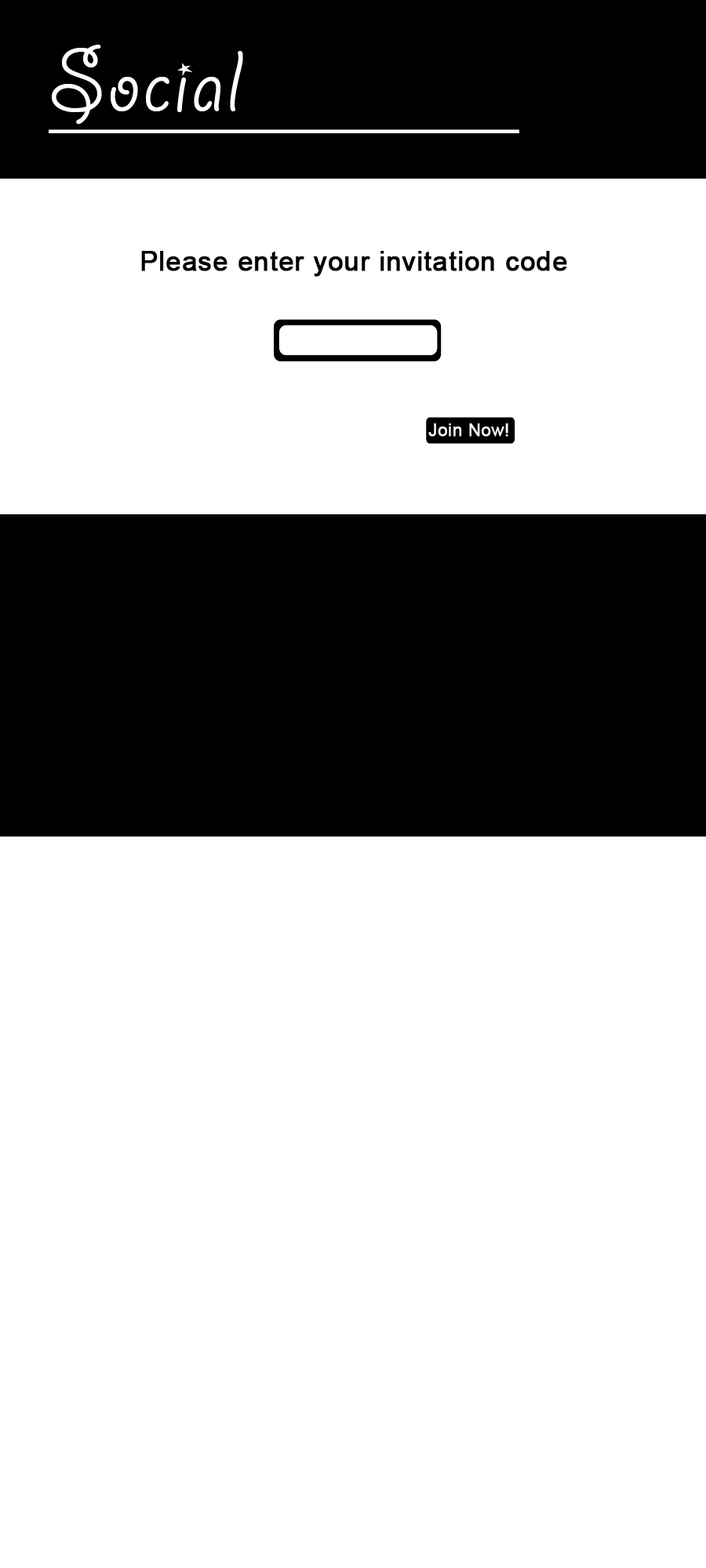
<style>
.page{position:relative;width:706px;height:1568px;background:#ffffff}
.page>*{position:absolute;margin:0}
.t1{font:97.2px "GiddyupStd";letter-spacing:0.02em;color:#ffffff}
.t2{font:26.7px "ArialMT";letter-spacing:0.02em;color:#000000;font-weight:bold}
.t3{font:16.9px "ArialMT";letter-spacing:0.02em;color:#f5f5f5;font-weight:bold}
</style>
<div class="page">
<p class="t1" style="left:52px;top:45px;width:191px;height:80px">Social</p>
<p class="t2" style="left:141px;top:251px;width:426px;height:26px">Please enter your invitation code</p>
<p class="t3" style="left:428px;top:423px;width:80px;height:14px">Join Now!</p>
</div>
